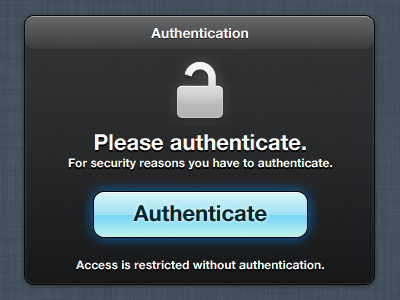
<style>
.page{position:relative;width:400px;height:300px}
.page>*{position:absolute;margin:0}
.t1{font:14px "HelveticaNeue-Bold"}
.t2{font:12px/17px "HelveticaNeue-Bold";color:#ffffff}
.t3{font:22px/33px "HelveticaNeue-Bold";color:#ffffff}
.t4{font:22px "HelveticaNeue-Bold";color:#002630}
</style>
<div class="page">
<p class="t1" style="left:151px;top:28px;width:97px;height:11px">Authentication</p>
<p class="t1" style="left:151px;top:28px;width:97px;height:11px">Authentication</p>
<p class="t1" style="left:151px;top:28px;width:98px;height:11px">Authentication</p>
<p class="t2" style="left:68px;top:134px;width:264px;height:136px;text-align:center"><span class="t3">Please authenticate.<br></span>For security reasons you have to authenticate.<br><br><br><br><br><br>Access is restricted without authentication.</p>
<p class="t2" style="left:68px;top:134px;width:264px;height:136px;text-align:center"><span class="t3">Please authenticate.<br></span>For security reasons you have to authenticate.<br><br><br><br><br><br>Access is restricted without authentication.</p>
<p class="t2" style="left:69px;top:134px;width:264px;height:136px;text-align:center"><span class="t3">Please authenticate.<br></span>For security reasons you have to authenticate.<br><br><br><br><br><br>Access is restricted without authentication.</p>
<p class="t4" style="left:133px;top:205px;width:134px;height:17px">Authenticate</p>
<p class="t4" style="left:133px;top:205px;width:134px;height:17px">Authenticate</p>
<p class="t4" style="left:133px;top:205px;width:134px;height:17px">Authenticate</p>
</div>
